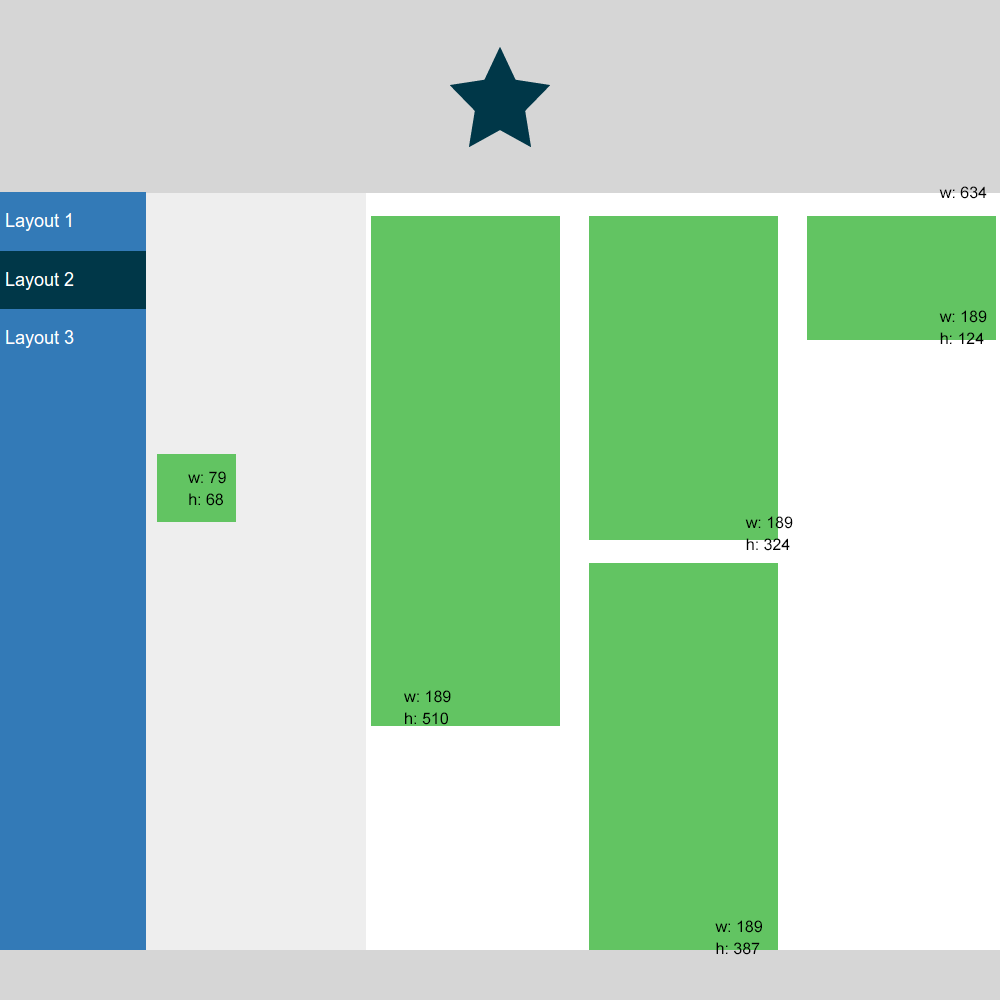
<style>
.page{position:relative;width:1000px;height:1000px;background:#62c462}
.page>*{position:absolute;margin:0}
.t1{font:16px "ArialMT";color:#000000}
.t2{font:16px/22px "ArialMT";color:#000000}
</style>
<div class="page">
<p class="t1" style="left:939px;top:186px;width:48px;height:13px">w: 634</p>
<p class="t2" style="left:939px;top:310px;width:48px;height:34px">w: 189<br>h: 124</p>
<p class="t2" style="left:188px;top:471px;width:38px;height:35px">w: 79<br>h: 68</p>
<p class="t2" style="left:745px;top:516px;width:48px;height:35px">w: 189<br>h: 324</p>
<p class="t2" style="left:404px;top:690px;width:47px;height:35px">w: 189<br>h: 510</p>
<p class="t2" style="left:715px;top:920px;width:47px;height:35px">w: 189<br>h: 387</p>
</div>
